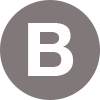
<style>
.page{position:relative;width:100px;height:100px;background:#817979}
.page>*{position:absolute;margin:0}
.t1{font:75px "HelveticaNeue-Bold";color:#fffdfd}
</style>
<div class="page">
<p class="t1" style="left:28px;top:23px;width:46px;height:53px">B</p>
</div>
